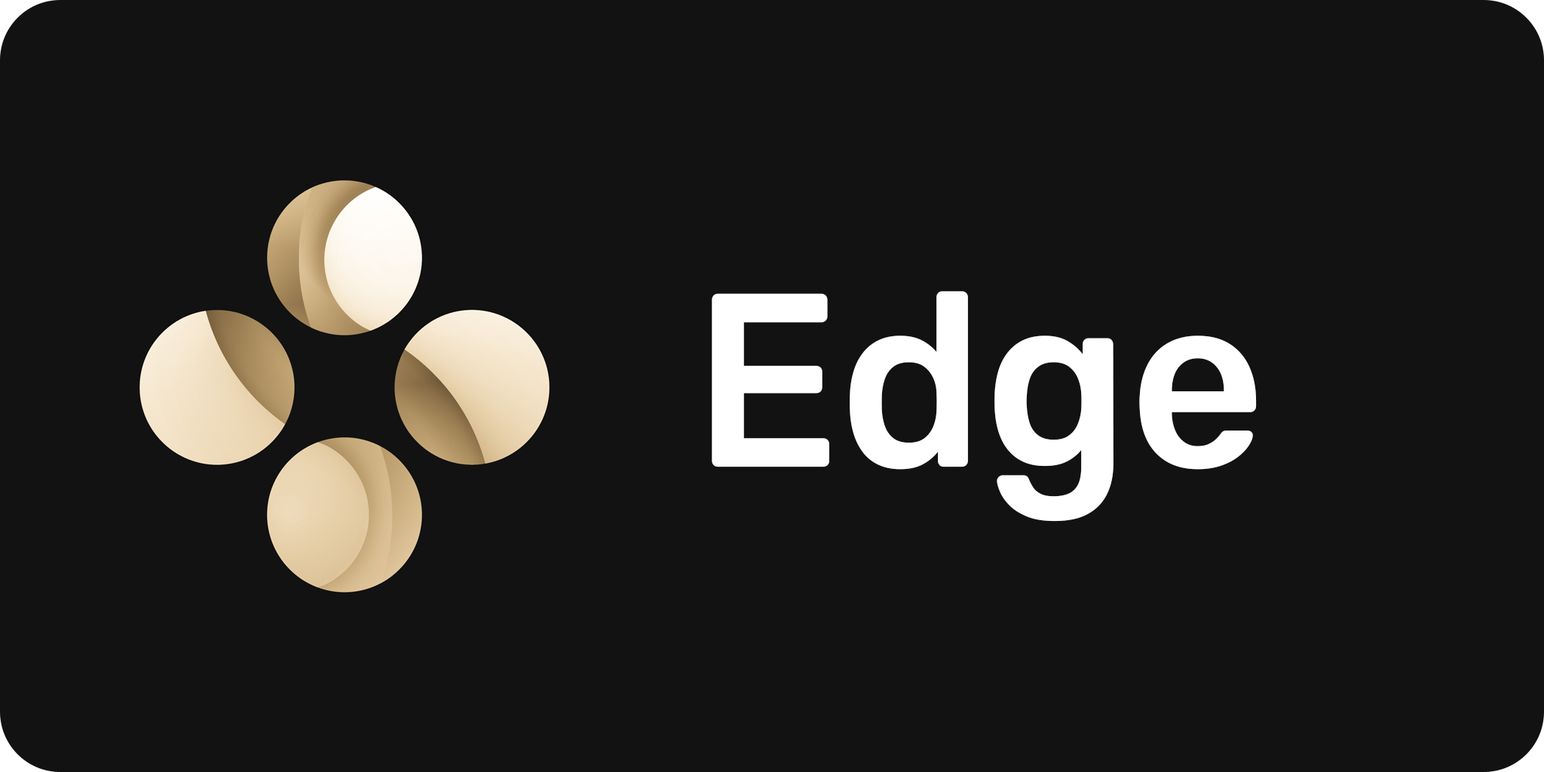
<style>
.page{position:relative;width:1544px;height:772px;background:#121212}
.page>*{position:absolute;margin:0}
.t1{font:247px "RubikRoman-Medium";color:#ffffff;scale:0.96 1}
</style>
<div class="page">
<p class="t1" style="left:712px;top:291px;width:545px;height:231px">Edge</p>
</div>
